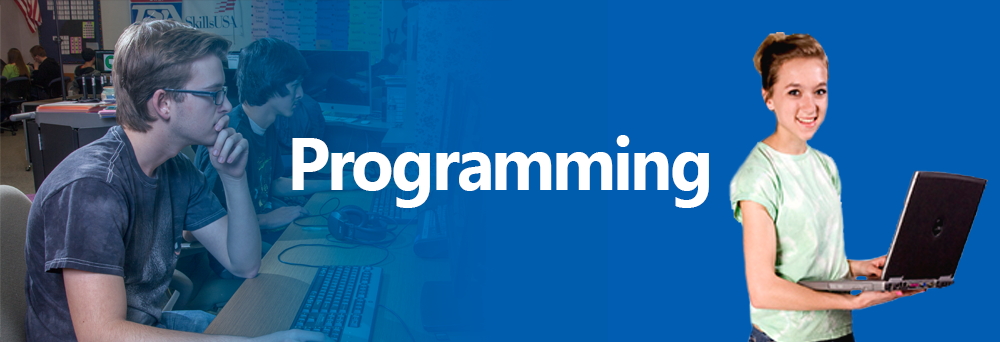
<style>
.page{position:relative;width:1000px;height:342px;background:#005db2}
.page>*{position:absolute;margin:0}
.t1{font:73.9px "MyanmarText-Bold";letter-spacing:-0.04em;color:#ffffff;scale:0.94 1}
</style>
<div class="page">
<p class="t1" style="left:292px;top:135px;width:417px;height:73px">Programming</p>
</div>
